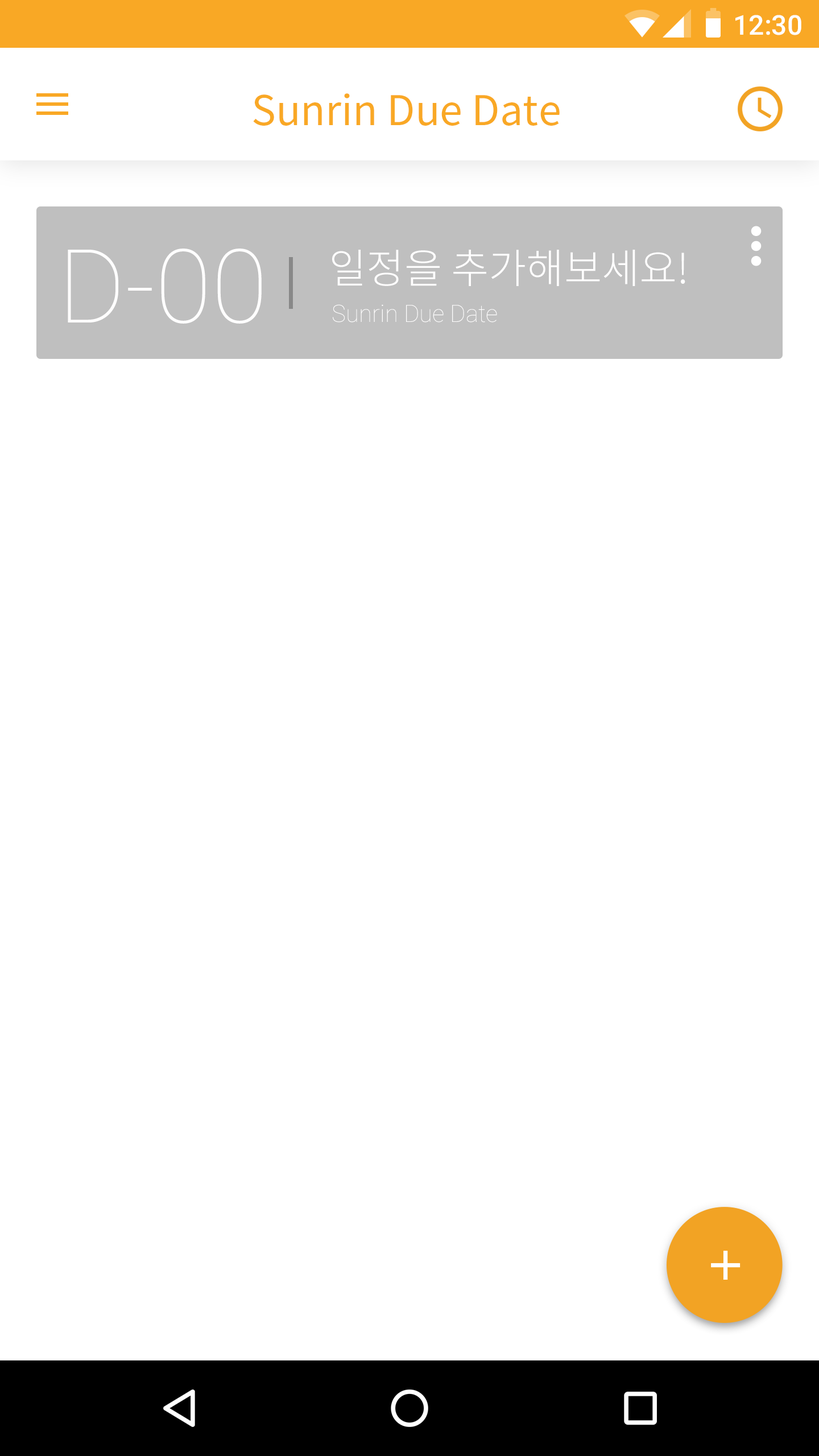
<style>
.page{position:relative;width:819px;height:1456px;background:#ffffff}
.page>*{position:absolute;margin:0}
.t1{font:27.3px "Roboto-Medium";color:#ffffff}
.t2{font:40.9px "NotoSansCJKkr-Regular";color:#f9a825}
.t3{font:102.4px "Roboto-Thin";color:#fffefe}
.t4{font:40.9px "NotoSansCJKkr-Light";color:#fffefe}
.t5{font:23.9px "Roboto-Thin";color:#fffefe}
</style>
<div class="page">
<p class="t1" style="left:735px;top:15px;width:66px;height:20px">12:30</p>
<p class="t2" style="left:253px;top:93px;width:307px;height:33px">Sunrin Due Date</p>
<p class="t3" style="left:68px;top:249px;width:194px;height:75px">D-00</p>
<p class="t4" style="left:332px;top:250px;width:353px;height:36px">일정을 추가해보세요!</p>
<p class="t5" style="left:333px;top:304px;width:164px;height:18px">Sunrin Due Date</p>
</div>
